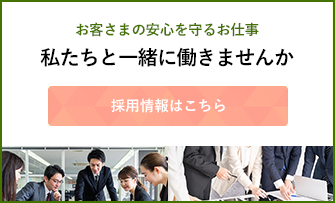
<style>
.page{position:relative;width:335px;height:203px;background:#ffffff}
.page>*{position:absolute;margin:0}
.t1{font:14.5px "YuGothic-Bold";letter-spacing:-0.025em;color:#467201}
.t2{font:20.5px "YuGothic-Bold";letter-spacing:-0.05em;color:#000000}
.t3{font:14.5px "YuGothic-Bold";color:#ffffff}
</style>
<div class="page">
<p class="t1" style="left:76px;top:22px;width:183px;height:15px">お客さまの安心を守るお仕事</p>
<p class="t2" style="left:40px;top:47px;width:254px;height:20px">私たちと一緒に働きませんか</p>
<p class="t3" style="left:111px;top:98px;width:114px;height:15px">採用情報はこちら</p>
</div>
